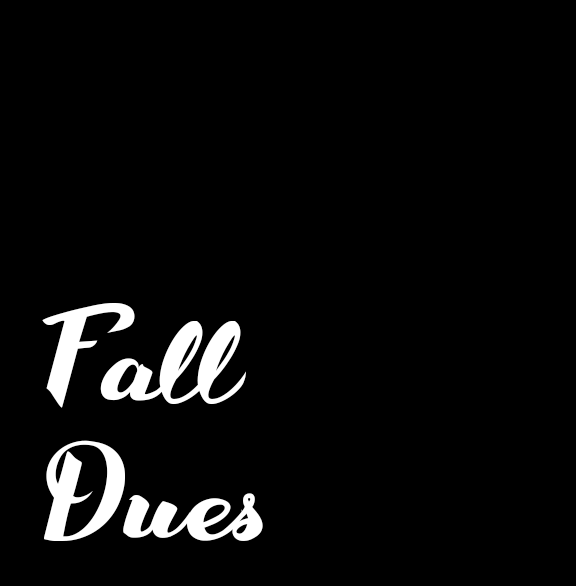
<style>
.page{position:relative;width:576px;height:586px;background:#000000}
.page>*{position:absolute;margin:0}
.t1{font:115.3px "WakeUpBro";color:#ffffff}
</style>
<div class="page">
<p class="t1" style="left:42px;top:303px;width:221px;height:238px">Fall<br>Dues</p>
</div>
